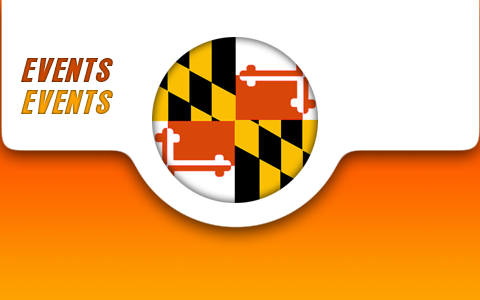
<style>
.page{position:relative;width:480px;height:300px;background:#ffffff}
.page>*{position:absolute;margin:0}
.t1{font:30px "ArroyoItalic";letter-spacing:0.045em}
</style>
<div class="page">
<p class="t1" style="left:21px;top:58px;width:92px;height:24px">EVENTS</p>
<p class="t1" style="left:21px;top:90px;width:92px;height:24px">EVENTS</p>
</div>
